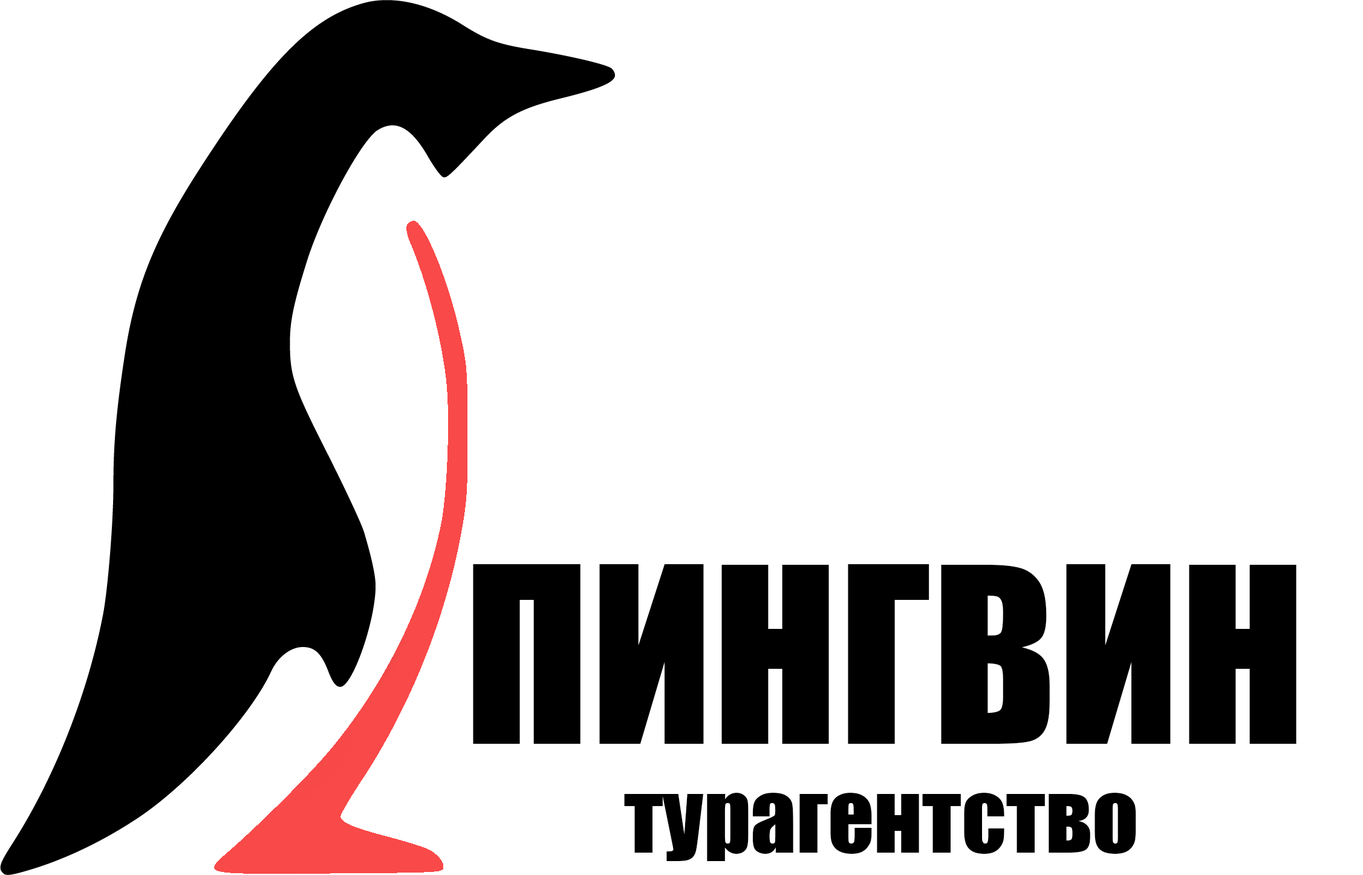
<style>
.page{position:relative;width:1363px;height:875px;background:#ffffff}
.page>*{position:absolute;margin:0}
.t1{font:90.7px "Impact";color:#000000}
.t2{font:226.7px "Impact";color:#000000}
</style>
<div class="page">
<p class="t1" style="left:473px;top:564px;width:823px;height:297px"><span class="t2">ПИНГВИН<br></span>          турагентство</p>
</div>
